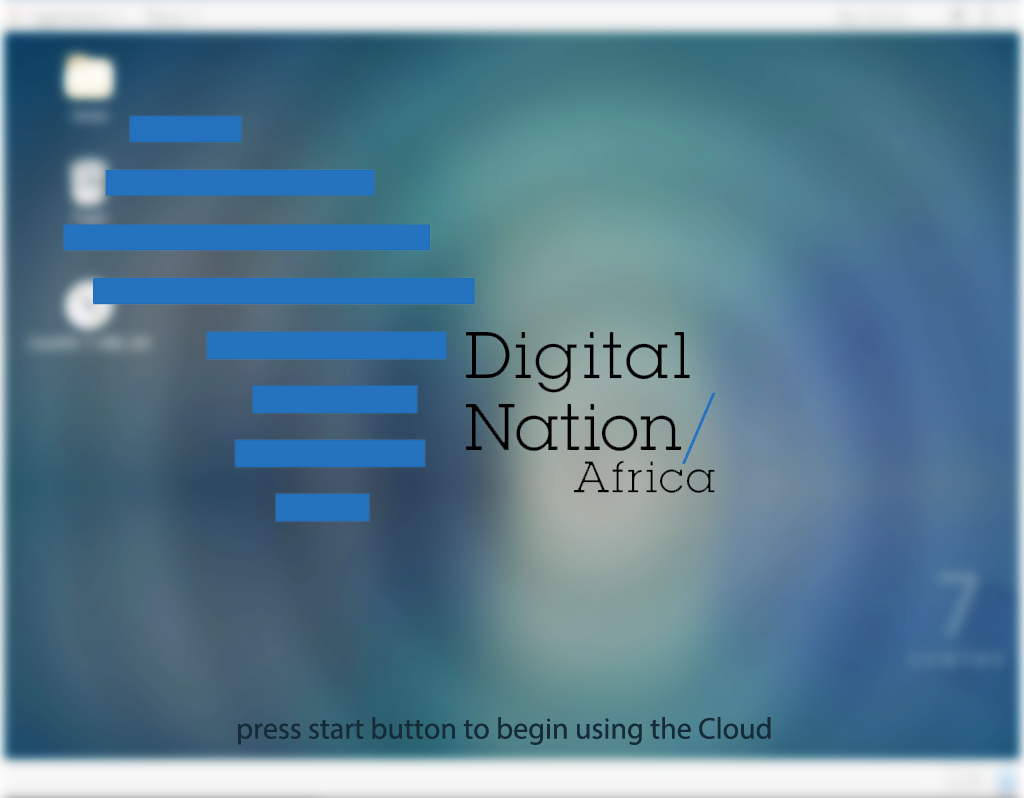
<style>
.page{position:relative;width:1024px;height:798px}
.page>*{position:absolute;margin:0}
.t1{font:30px "MyriadPro-Regular";color:#162b38}
</style>
<div class="page">
<p class="t1" style="left:238px;top:717px;width:533px;height:28px">press start button to begin using the Cloud</p>
</div>
